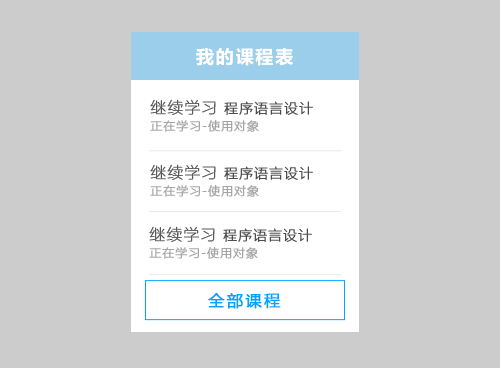
<style>
.page{position:relative;width:500px;height:368px;background:#cccccc}
.page>*{position:absolute;margin:0}
.t1{font:18px "MicrosoftYaHei-Bold";letter-spacing:0.1em;color:#ffffff}
.t2{font:12px/20px "FZLTCXHJW--GB1-0";color:#a5a5a5;font-weight:bold}
.t3{font:16px/20px "FZLTCXHJW--GB1-0";color:#4e4e4e;font-weight:bold}
.t4{font:14px/20px "FZLTCXHJW--GB1-0";color:#4e4e4e;font-weight:bold}
.t5{font:16px "MicrosoftYaHei";letter-spacing:0.1em;color:#00a4ff;font-weight:bold}
</style>
<div class="page">
<p class="t1" style="left:196px;top:48px;width:97px;height:18px">我的课程表</p>
<p class="t2" style="left:150px;top:99px;width:163px;height:33px;text-align:justify"><span class="t3">继续学习 </span><span class="t4">程序语言设计<br></span>正在学习-使用对象</p>
<p class="t2" style="left:150px;top:164px;width:163px;height:33px;text-align:justify"><span class="t3">继续学习 </span><span class="t4">程序语言设计<br></span>正在学习-使用对象</p>
<p class="t2" style="left:149px;top:226px;width:163px;height:33px;text-align:justify"><span class="t3">继续学习 </span><span class="t4">程序语言设计<br></span>正在学习-使用对象</p>
<p class="t5" style="left:208px;top:293px;width:73px;height:16px">全部课程</p>
</div>
